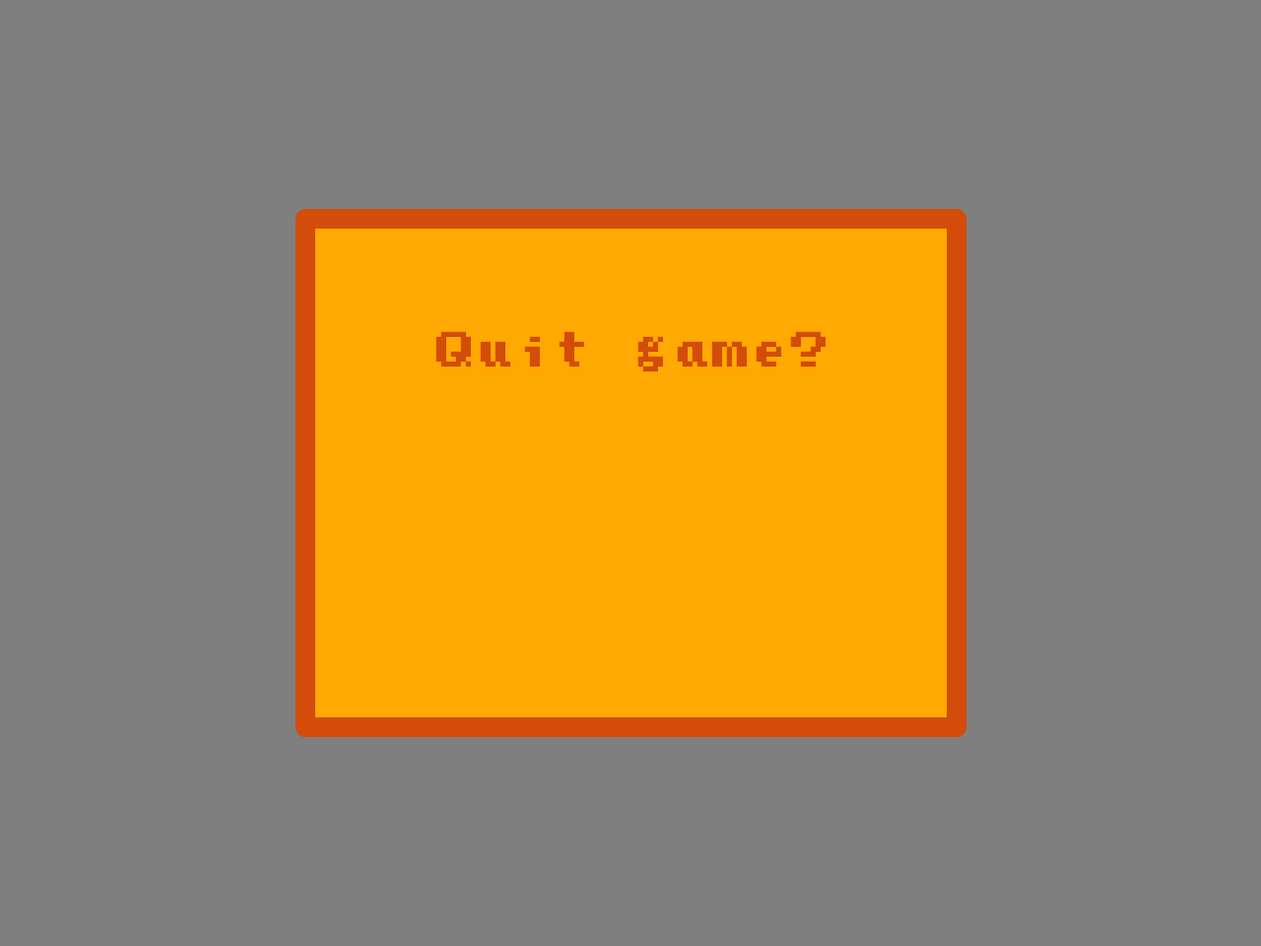
<style>
.page{position:relative;width:1261px;height:946px;background:#7f7f7f}
.page>*{position:absolute;margin:0}
.t1{font:39.4px "PressStartReg";color:#d34c0a}
</style>
<div class="page">
<p class="t1" style="left:435px;top:331px;width:391px;height:40px">Quit game?</p>
</div>
